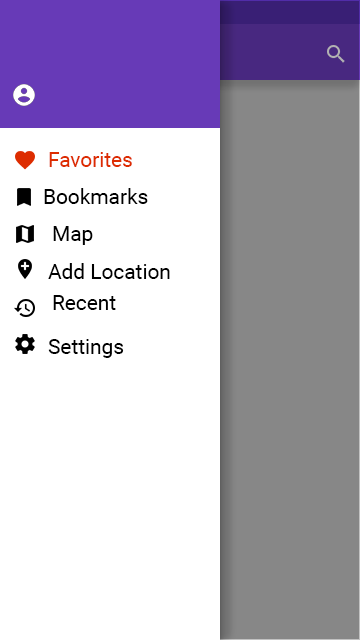
<style>
.page{position:relative;width:360px;height:640px;background:#ffffff}
.page>*{position:absolute;margin:0}
.t1{font:20.8px "Roboto-Regular";color:#dd2c00}
.t2{font:20.8px "Roboto-Regular";color:#000000}
</style>
<div class="page">
<p class="t1" style="left:49px;top:152px;width:83px;height:15px">Favorites</p>
<p class="t2" style="left:44px;top:188px;width:104px;height:16px">Bookmarks</p>
<p class="t2" style="left:53px;top:226px;width:40px;height:19px">Map</p>
<p class="t2" style="left:48px;top:263px;width:122px;height:16px">Add Location</p>
<p class="t2" style="left:53px;top:295px;width:63px;height:15px">Recent</p>
<p class="t2" style="left:48px;top:339px;width:76px;height:19px">Settings</p>
</div>
